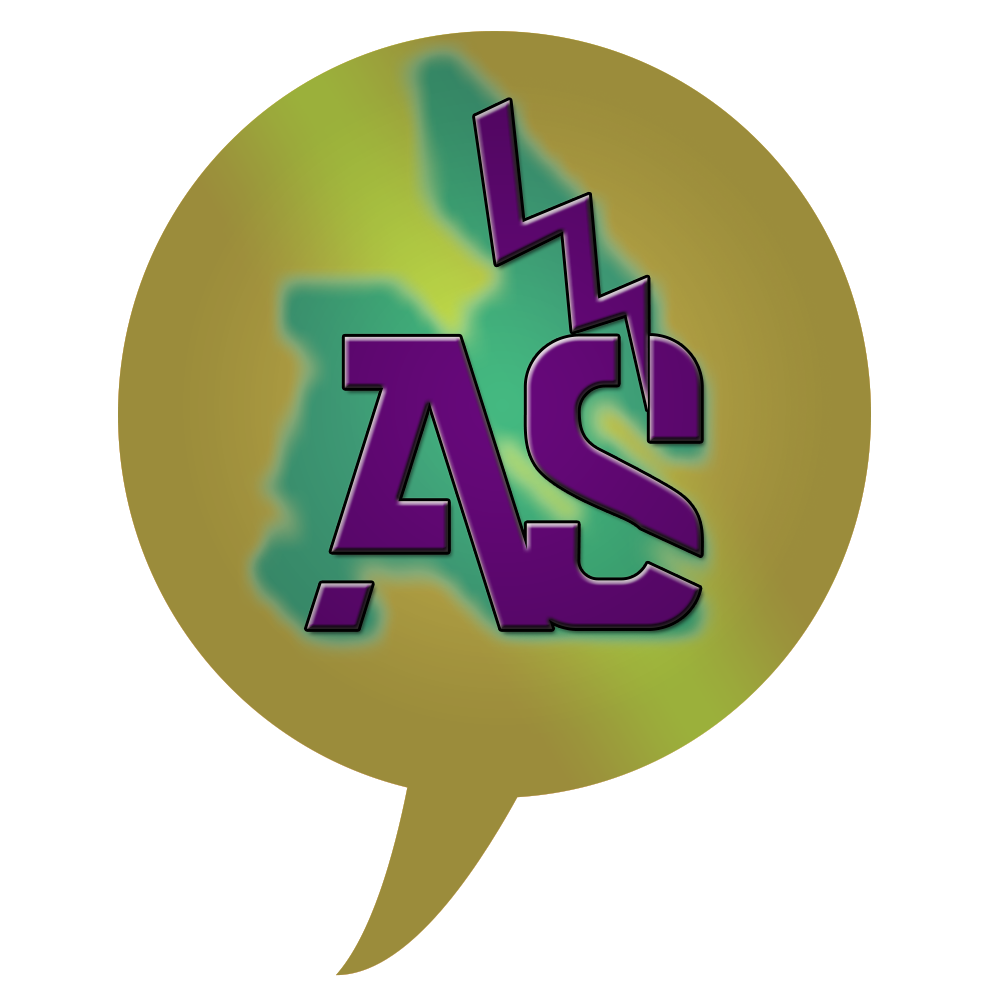
<style>
.page{position:relative;width:1000px;height:1000px;background:#ffffff}
.page>*{position:absolute;margin:0}
.t1{font:417px "ColdArmyFreeTrial";letter-spacing:-0.08em;color:#67087b}
</style>
<div class="page">
<p class="t1" style="left:306px;top:336px;width:395px;height:293px">AS</p>
</div>
